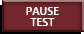
<style>
.page{position:relative;width:84px;height:34px;background:#74272d}
.page>*{position:absolute;margin:0}
.t1{font:11px/11px "SegoeUI-SemiBold";color:#ffffff}
</style>
<div class="page">
<p class="t1" style="left:26px;top:7px;width:33px;height:19px;text-align:center">PAUSE<br>TEST</p>
</div>
